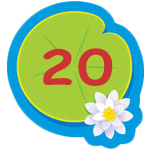
<style>
.page{position:relative;width:150px;height:150px;background:#ffffff}
.page>*{position:absolute;margin:0}
.t1{font:48px "ComicSansMS-Bold";letter-spacing:0.05em;color:#cc3333;text-transform:uppercase;scale:1.2 1}
</style>
<div class="page">
<p class="t1" style="left:43px;top:48px;width:70px;height:38px">20</p>
</div>
